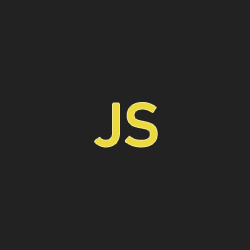
<style>
.page{position:relative;width:250px;height:250px;background:#222222}
.page>*{position:absolute;margin:0}
.t1{font:60px "Bahnschrift";letter-spacing:-0.025em;color:#ecd93d}
</style>
<div class="page">
<p class="t1" style="left:95px;top:103px;width:62px;height:44px">JS</p>
</div>
